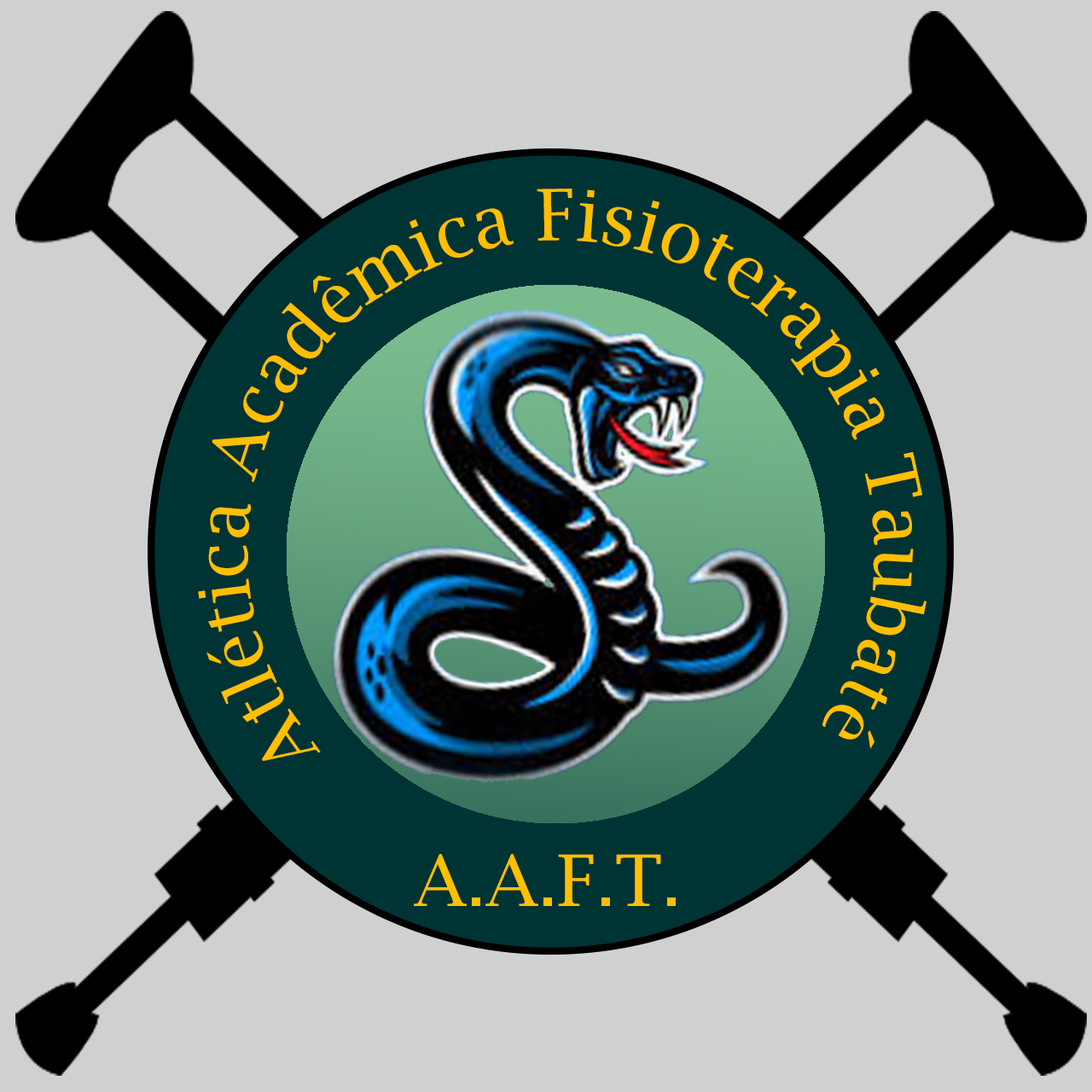
<style>
.page{position:relative;width:1092px;height:1092px;background:#d0d0d0}
.page>*{position:absolute;margin:0}
.t1{font:71.1px "LucidaBright";color:#ffbf00}
</style>
<div class="page">
<p class="t1" style="left:198px;top:189px;width:728px;height:572px;text-align:center">Atlética Acadêmica Fisioterapia Taubaté</p>
<p class="t1" style="left:414px;top:854px;width:262px;height:52px">A.A.F.T.</p>
</div>
